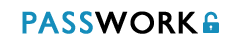
<style>
.page{position:relative;width:250px;height:45px;background:#ffffff}
.page>*{position:absolute;margin:0}
.t1{font:30px "Gibson-Regular";letter-spacing:0.075em;color:#158dbb;font-weight:bold}
.t2{font:30px "Gibson-Regular";letter-spacing:0.075em;color:#000000;font-weight:bold}
</style>
<div class="page">
<p class="t1" style="left:22px;top:11px;width:176px;height:23px">PASS<span class="t2">WORK</span></p>
</div>
